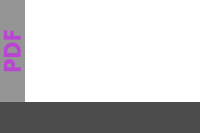
<style>
.page{position:relative;width:200px;height:133px;background:#ffffff}
.page>*{position:absolute;margin:0}
.t1{font:25px "FuturaPT-Heavy";color:#b846d0;text-transform:uppercase}
</style>
<div class="page">
<p class="t1" style="left:3px;top:30px;width:18px;height:42px;rotate:-90deg">PDF</p>
</div>
